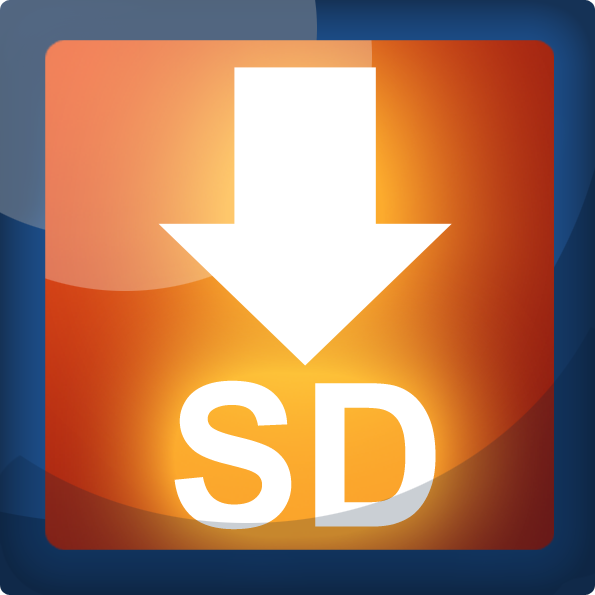
<style>
.page{position:relative;width:595px;height:595px}
.page>*{position:absolute;margin:0}
.t1{font:200px "Arial-BoldMT";color:#ffffff}
</style>
<div class="page">
<p class="t1" style="left:174px;top:380px;width:262px;height:150px">SD</p>
</div>
